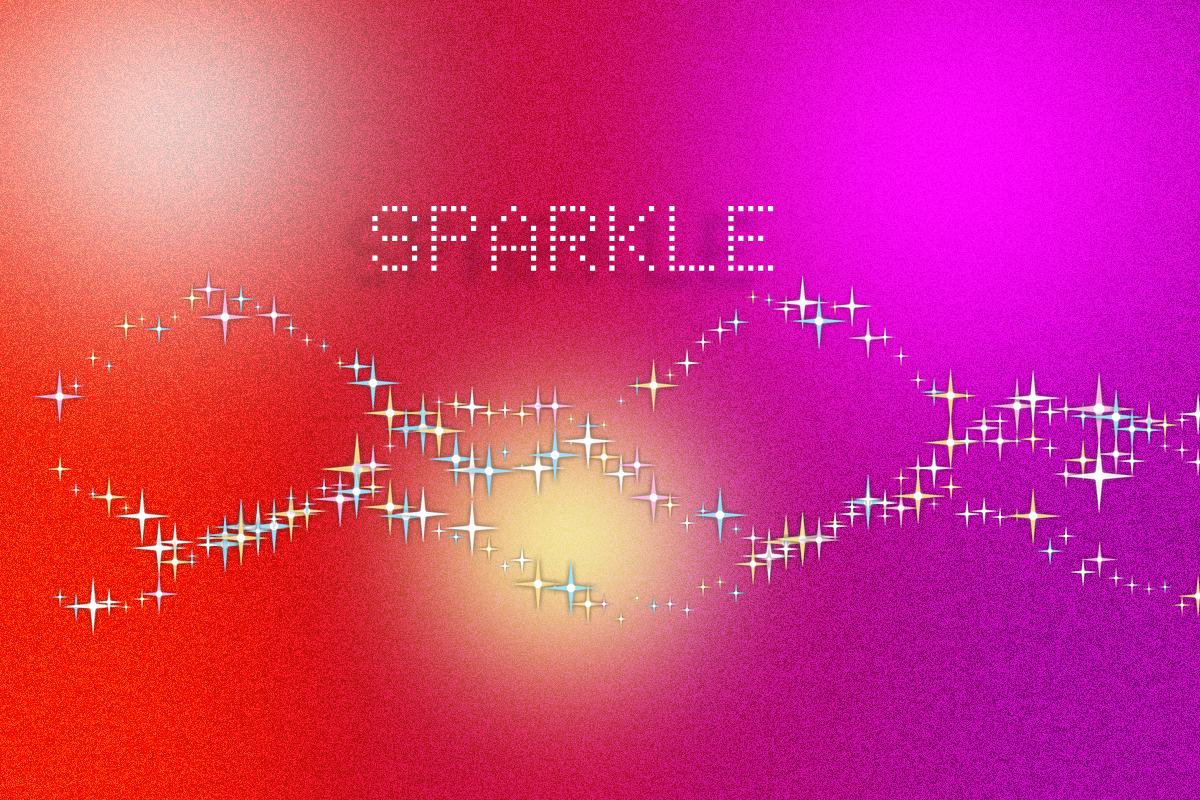
<style>
.page{position:relative;width:1200px;height:800px}
.page>*{position:absolute;margin:0}
.t1{font:99px "Doto-Regular";color:#ffffff}
</style>
<div class="page">
<p class="t1" style="left:372px;top:206px;width:402px;height:65px">SPARKLE</p>
</div>
